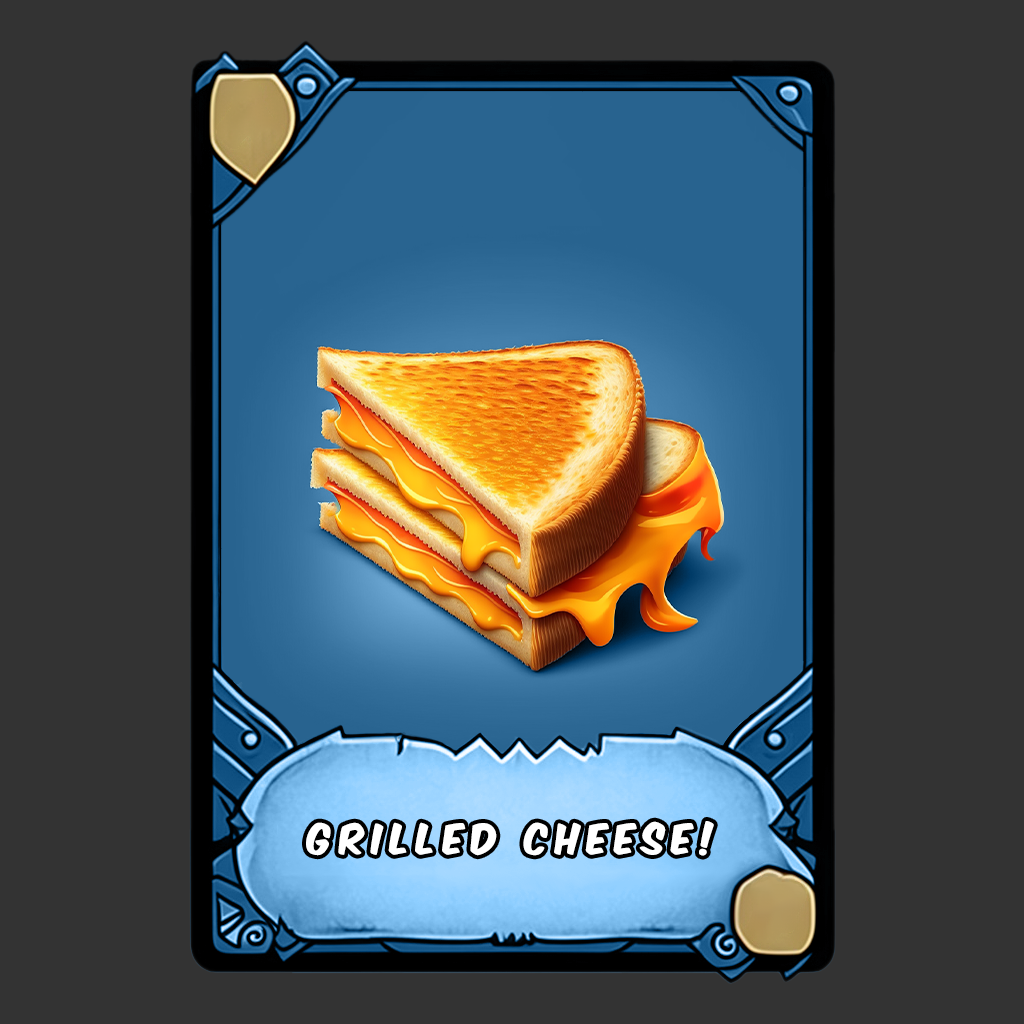
<style>
.page{position:relative;width:1024px;height:1024px;background:#333333}
.page>*{position:absolute;margin:0}
.t1{font:36px "KomikaAxis";letter-spacing:0.2em;color:#ffffff}
</style>
<div class="page">
<p class="t1" style="left:306px;top:821px;width:408px;height:35px">grilled cheese!</p>
</div>
